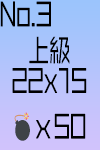
<style>
.page{position:relative;width:100px;height:150px}
.page>*{position:absolute;margin:0}
.t1{font:30px "VDL-LineGR-Regular";color:#000000;scale:0.7 1}
.t2{font:30px/30px "VDL-LineGR-Regular";color:#000000;scale:0.7 1}
</style>
<div class="page">
<p class="t1" style="left:0px;top:1px;width:51px;height:26px">No.3</p>
<p class="t2" style="left:12px;top:36px;width:75px;height:58px;text-align:center">上級<br>22x15</p>
</div>
